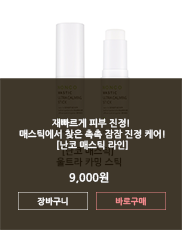
<style>
.page{position:relative;width:182px;height:230px;background:#3f372a}
.page>*{position:absolute;margin:0}
.t1{font:9.2px "NanumGothicBold";color:#fbfbfb}
.t2{font:11px "NanumGothicBold";color:#ffffff}
.t3{font:8.3px "NanumGothicBold";color:#ffffff}
.t4{font:8.3px "NanumGothicBold";color:#f58c8f}
</style>
<div class="page">
<p class="t1" style="left:19px;top:118px;width:146px;height:32px;text-align:center">재빠르게 피부 진정! <br>매스틱에서 찾은 촉촉 잠잠 진정 케어!<br>[난코 매스틱 라인]</p>
<p class="t2" style="left:69px;top:172px;width:40px;height:12px">9,000원</p>
<p class="t2" style="left:69px;top:172px;width:40px;height:12px">9,000원</p>
<p class="t3" style="left:37px;top:197px;width:31px;height:9px">장바구니</p>
<p class="t4" style="left:115px;top:197px;width:31px;height:9px">바로구매</p>
</div>
